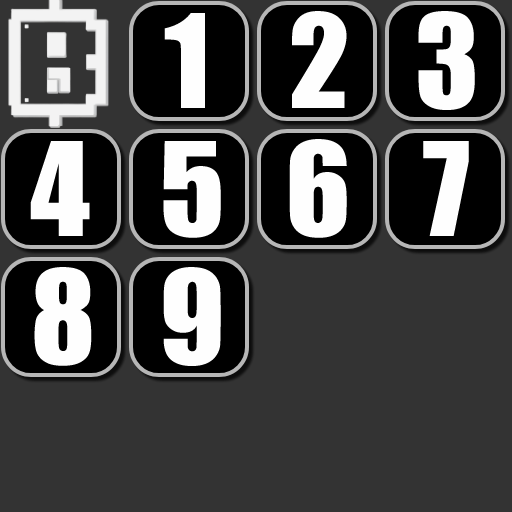
<style>
.page{position:relative;width:512px;height:512px;background:#333333}
.page>*{position:absolute;margin:0}
.t1{font:120px "Impact";color:#fefefe}
</style>
<div class="page">
<p class="t1" style="left:164px;top:13px;width:41px;height:95px">1</p>
<p class="t1" style="left:292px;top:11px;width:55px;height:97px">2</p>
<p class="t1" style="left:418px;top:11px;width:57px;height:99px">3</p>
<p class="t1" style="left:30px;top:141px;width:60px;height:95px">4</p>
<p class="t1" style="left:163px;top:141px;width:58px;height:97px">5</p>
<p class="t1" style="left:289px;top:139px;width:58px;height:99px">6</p>
<p class="t1" style="left:423px;top:141px;width:46px;height:95px">7</p>
<p class="t1" style="left:34px;top:267px;width:58px;height:99px">8</p>
<p class="t1" style="left:163px;top:267px;width:58px;height:99px">9</p>
</div>
